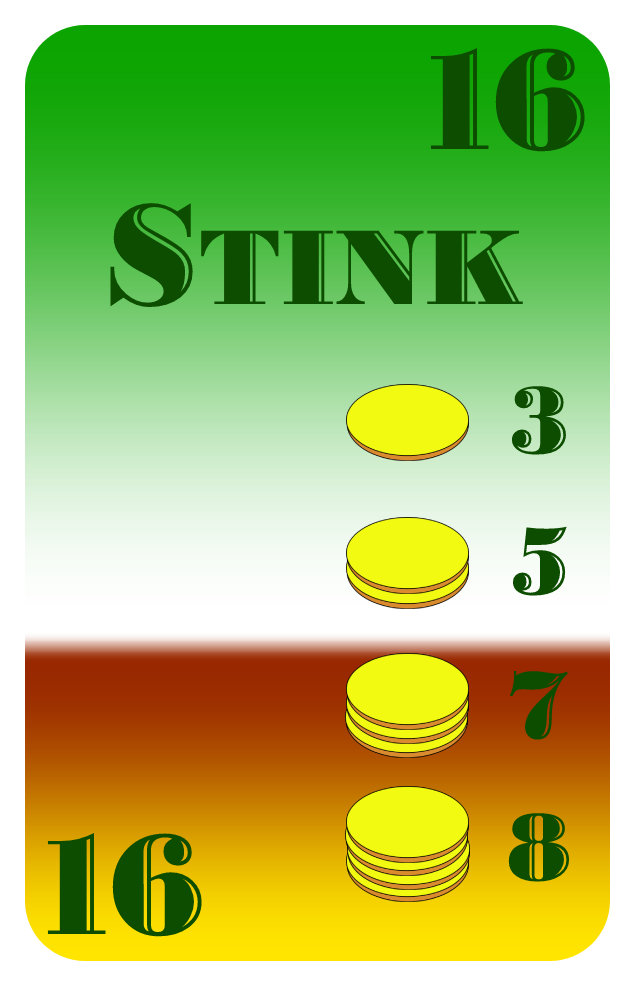
<style>
.page{position:relative;width:635px;height:986px}
.page>*{position:absolute;margin:0}
.t1{font:150px "BodoniHighlightICG";color:#0d4d00}
.t2{font:112px "BodoniHighlightICG";color:#0d4d00}
.t3{font:100px "BodoniHighlightICG";color:#0d4d00}
</style>
<div class="page">
<p class="t1" style="left:430px;top:48px;width:155px;height:104px">16</p>
<p class="t2" style="left:110px;top:203px;width:413px;height:105px"><span class="t1">S</span>TINK</p>
<p class="t3" style="left:511px;top:386px;width:55px;height:69px">3</p>
<p class="t3" style="left:512px;top:526px;width:55px;height:70px">5</p>
<p class="t3" style="left:510px;top:671px;width:58px;height:69px">7</p>
<p class="t3" style="left:508px;top:813px;width:62px;height:69px">8</p>
<p class="t1" style="left:47px;top:833px;width:155px;height:104px">16</p>
</div>
